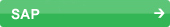
<style>
.page{position:relative;width:170px;height:27px;background:#33b656}
.page>*{position:absolute;margin:0}
.t1{font:14px "Arial-BoldMT";color:#ffffff}
</style>
<div class="page">
<p class="t1" style="left:11px;top:8px;width:29px;height:12px">SAP</p>
</div>
